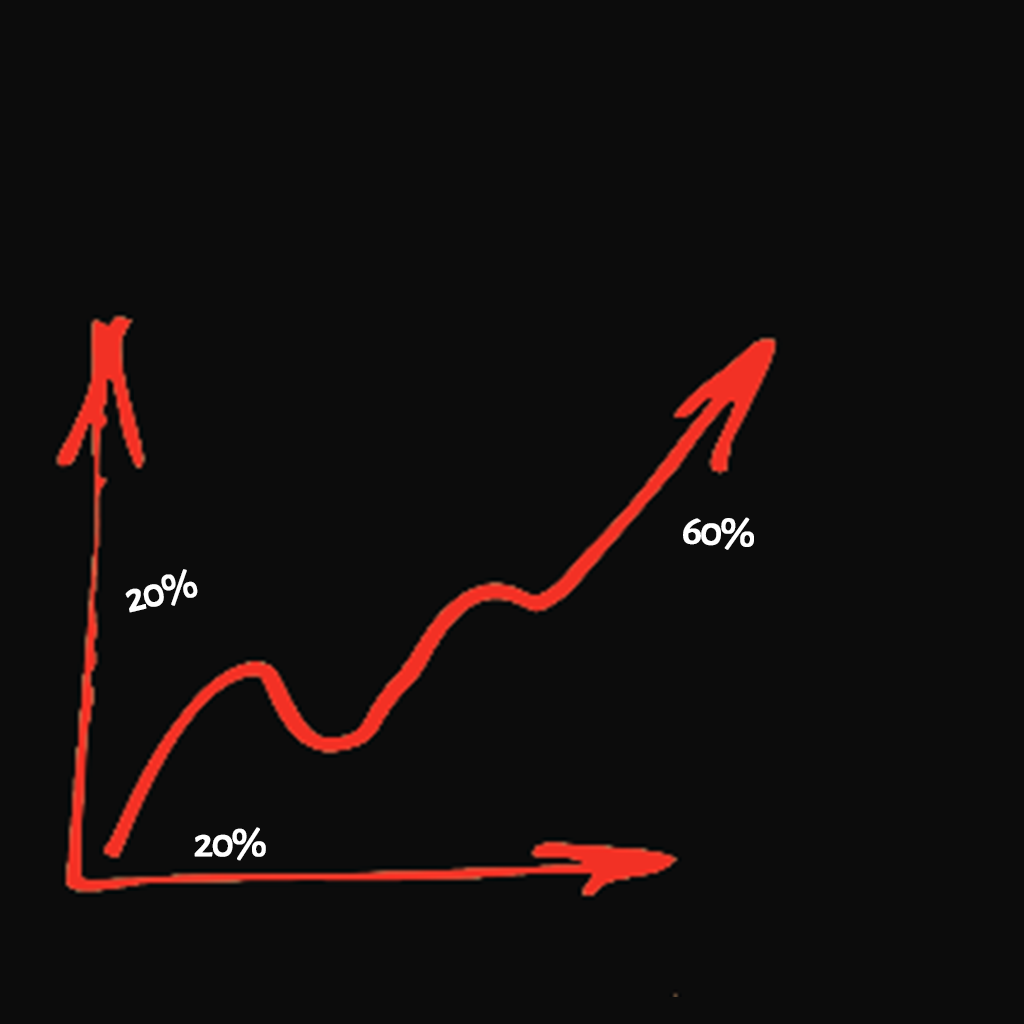
<style>
.page{position:relative;width:1024px;height:1024px;background:#0c0c0c}
.page>*{position:absolute;margin:0}
.t1{font:72px "AlegreyaSansSC-Medium";letter-spacing:-0.075em;color:#ffffff;font-weight:bold}
.t2{font:72px "AlegreyaSansSC-Medium";letter-spacing:-0.075em;color:#fefefe;font-weight:bold}
</style>
<div class="page">
<p class="t1" style="left:683px;top:517px;width:71px;height:33px;rotate:3deg">60%</p>
<p class="t2" style="left:125px;top:569px;width:73px;height:44px;rotate:-14deg">20%</p>
<p class="t1" style="left:194px;top:827px;width:72px;height:34px">20%</p>
</div>
